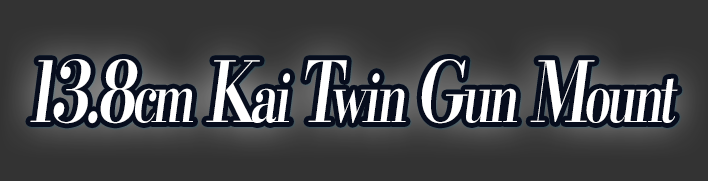
<style>
.page{position:relative;width:708px;height:181px;background:#333333}
.page>*{position:absolute;margin:0}
.t1{font:84px "KochoStd-Heavy";letter-spacing:-0.08em;color:#ffffff;font-style:italic;scale:0.73 1}
.t2{font:67.2px "KochoStd-Heavy";letter-spacing:-0.08em;color:#ffffff;font-style:italic;scale:0.73 1}
</style>
<div class="page">
<p class="t1" style="left:30px;top:59px;width:648px;height:65px">13.8<span class="t2">cm </span>K<span class="t2">ai </span>T<span class="t2">win </span>G<span class="t2">un</span> M<span class="t2">ount</span></p>
</div>
